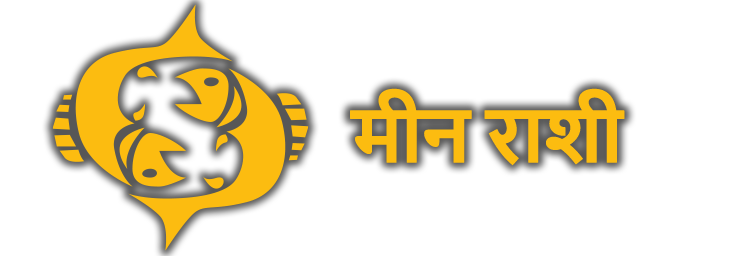
<style>
.page{position:relative;width:749px;height:256px;background:#ffffff}
.page>*{position:absolute;margin:0}
.t1{font:70.8px "NirmalaUI-Bold";letter-spacing:-0.05em;color:#fcbc10;text-transform:uppercase;font-weight:bold}
</style>
<div class="page">
<p class="t1" style="left:350px;top:88px;width:275px;height:78px">मीन राशी</p>
</div>
